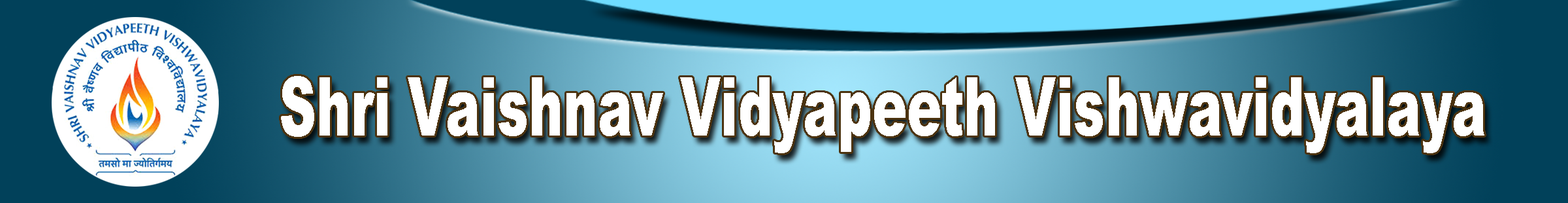
<style>
.page{position:relative;width:1568px;height:203px}
.page>*{position:absolute;margin:0}
.t1{font:81.8px "Arial-Black";color:#ffffff;scale:0.63 1}
</style>
<div class="page">
<p class="t1" style="left:281px;top:76px;width:1203px;height:77px">Shri Vaishnav Vidyapeeth Vishwavidyalaya</p>
</div>
